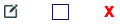
<style>
.page{position:relative;width:120px;height:24px;background:#ffffff}
.page>*{position:absolute;margin:0}
.t1{font:18.6px "Arial-BoldMT";letter-spacing:0.02em;color:#fe0000}
</style>
<div class="page">
<p class="t1" style="left:104px;top:6px;width:11px;height:11px">x</p>
</div>
